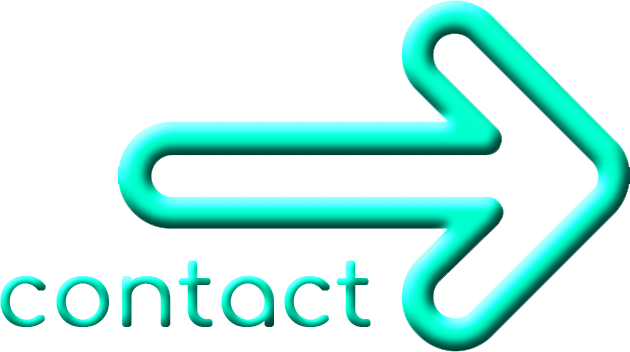
<style>
.page{position:relative;width:630px;height:352px;background:#ffffff}
.page>*{position:absolute;margin:0}
.t1{font:90.3px "Comfortaa-Regular";font-weight:bold}
</style>
<div class="page">
<p class="t1" style="left:0px;top:260px;width:371px;height:67px">contact</p>
</div>
